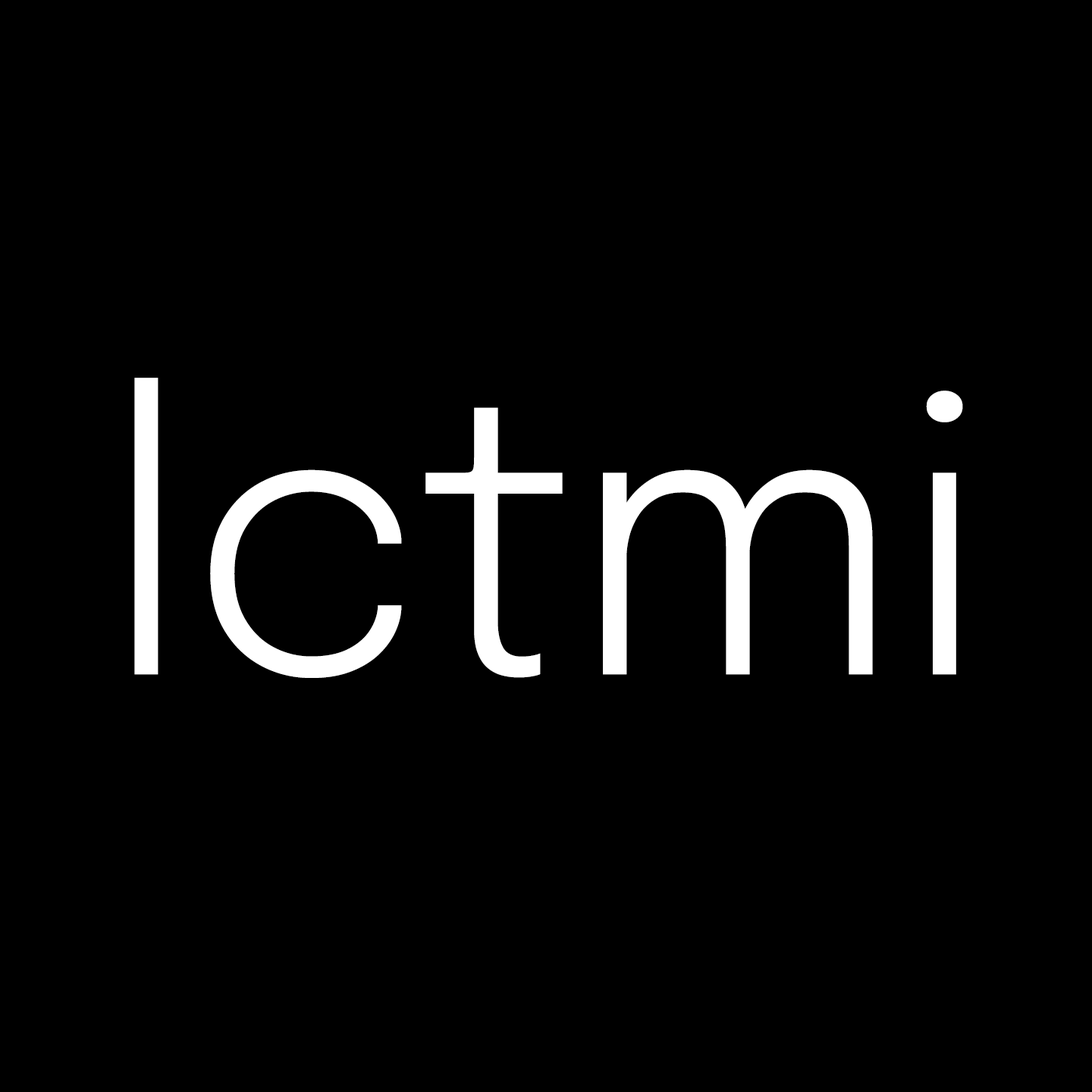
<style>
.page{position:relative;width:1092px;height:1092px;background:#000000}
.page>*{position:absolute;margin:0}
.t1{font:379.2px "Epilogue-Light";letter-spacing:-0.01em;color:#ffffff}
</style>
<div class="page">
<p class="t1" style="left:134px;top:378px;width:829px;height:300px">lctmi</p>
</div>
